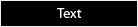
<style>
.page{position:relative;width:138px;height:27px;background:#000000}
.page>*{position:absolute;margin:0}
.t1{font:14px "MyriadPro-Regular";color:#ffffff}
</style>
<div class="page">
<p class="t1" style="left:57px;top:8px;width:25px;height:10px">Text</p>
</div>
